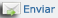
<style>
.page{position:relative;width:58px;height:18px;background:#eff0f1}
.page>*{position:absolute;margin:0}
.t1{font:10px "Verdana";color:#336ca1}
</style>
<div class="page">
<p class="t1" style="left:24px;top:5px;width:31px;height:8px">Enviar</p>
</div>
